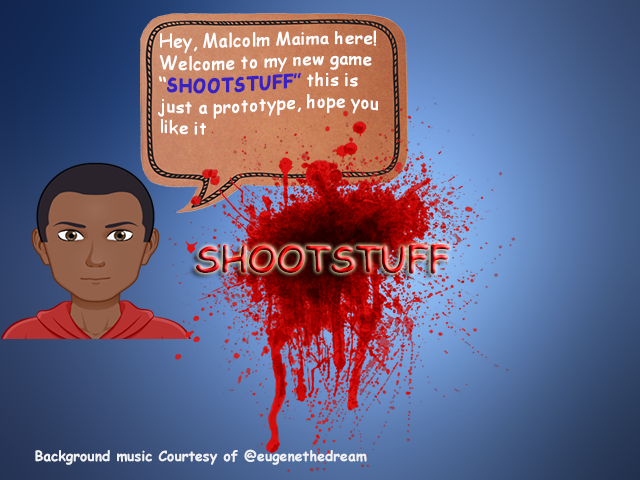
<style>
.page{position:relative;width:640px;height:480px}
.page>*{position:absolute;margin:0}
.t1{font:18px "ComicSansMS";color:#fefdfd}
.t2{font:18px "ComicSansMS-Bold";color:#3923c0}
.t3{font:18px "ComicSansMS";color:#3923c0}
.t4{font:36px "ComicSansMS-Bold"}
.t5{font:14px "ComicSansMS-Bold";color:#f0f1f4}
</style>
<div class="page">
<p class="t1" style="left:158px;top:30px;width:220px;height:105px;text-align:right">Hey, Malcolm Maima here! Welcome to my new game “<span class="t2">SHOOTSTUFF</span><span class="t3">” </span>this is just a prototype, hope you like it</p>
<p class="t4" style="left:196px;top:244px;width:254px;height:30px">SHOOTSTUFF</p>
<p class="t5" style="left:35px;top:449px;width:332px;height:16px">Background music Courtesy of @eugenethedream</p>
</div>
